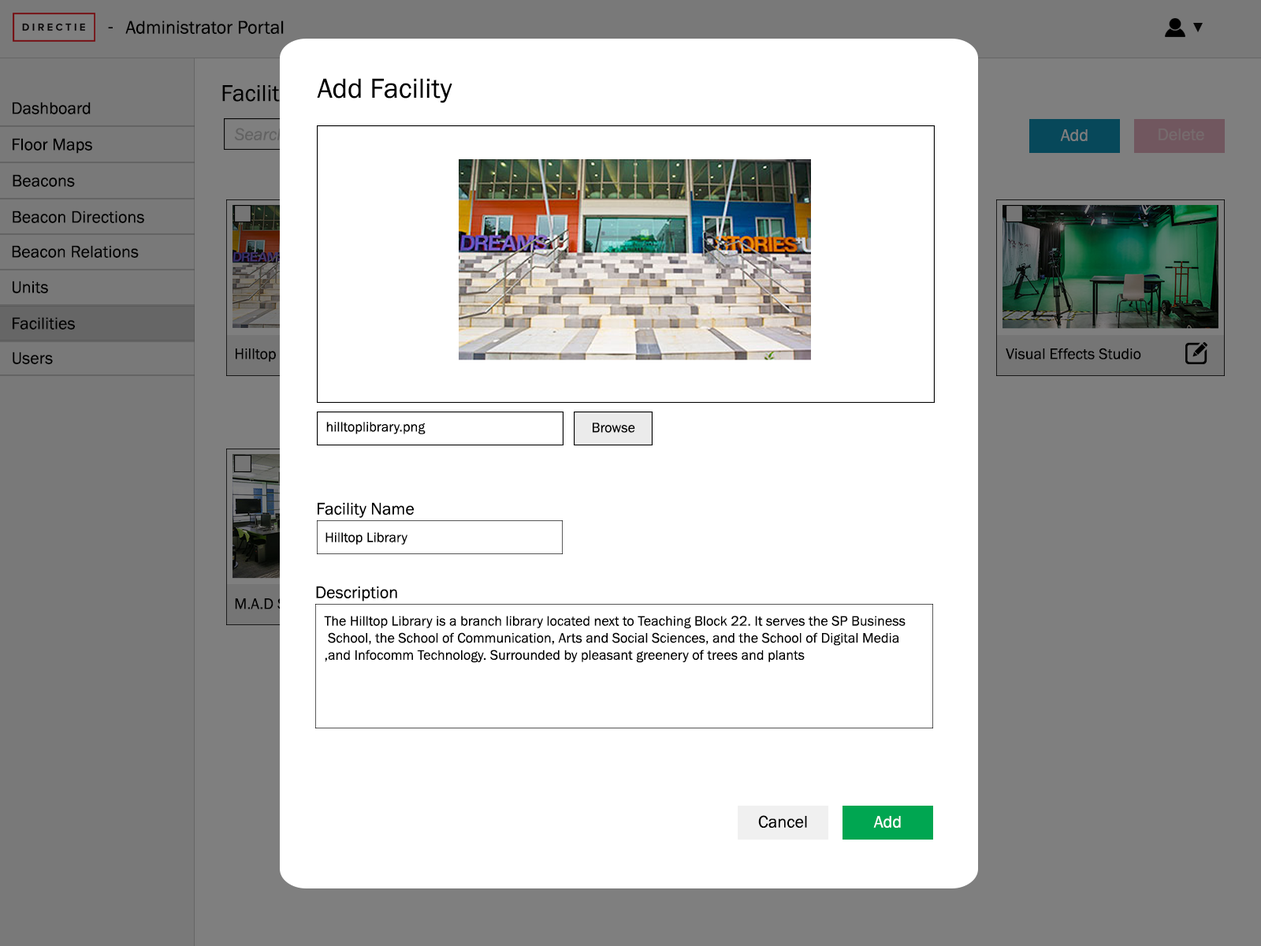
<style>
.page{position:relative;width:1261px;height:946px;background:#ffffff}
.page>*{position:absolute;margin:0}
.t1{font:18.9px "FranklinGothic-Book";color:#000000}
.t2{font:23.6px "FranklinGothic-Book";color:#000000}
.t3{font:28.4px "FranklinGothic-Book";color:#000000}
.t4{font:17.3px "FranklinGothic-Book";color:#000000}
.t5{font:17.3px "FranklinGothic-Book";color:#7f7f7f}
.t6{font:17.3px "FranklinGothic-Book";color:#766b6d}
.t7{font:15.7px "FranklinGothic-Book";color:#000000}
.t8{font:14.2px "FranklinGothic-Book";color:#000000}
.t9{font:17.3px "FranklinGothic-Book";color:#010101}
.t10{font:17.3px "FranklinGothic-Book";color:#fefefe}
</style>
<div class="page">
<p class="t1" style="left:108px;top:27px;width:5px;height:1px">-</p>
<p class="t1" style="left:125px;top:20px;width:159px;height:14px">Administrator Portal</p>
<p class="t2" style="left:222px;top:85px;width:86px;height:17px">Facilities</p>
<p class="t3" style="left:317px;top:78px;width:135px;height:25px">Add Facility</p>
<p class="t4" style="left:13px;top:102px;width:78px;height:12px">Dashboard</p>
<p class="t4" style="left:13px;top:138px;width:79px;height:16px">Floor Maps</p>
<p class="t5" style="left:1060px;top:129px;width:28px;height:12px">Add</p>
<p class="t6" style="left:1158px;top:128px;width:46px;height:12px">Delete</p>
<p class="t4" style="left:13px;top:174px;width:62px;height:13px">Beacons</p>
<p class="t4" style="left:13px;top:210px;width:131px;height:13px">Beacon Directions</p>
<p class="t4" style="left:12px;top:245px;width:127px;height:13px">Beacon Relations</p>
<p class="t4" style="left:13px;top:281px;width:35px;height:12px">Units</p>
<p class="t4" style="left:13px;top:317px;width:62px;height:12px">Facilities</p>
<p class="t4" style="left:13px;top:351px;width:40px;height:13px">Users</p>
<p class="t7" style="left:1006px;top:348px;width:135px;height:11px">Visual Effects Studio</p>
<p class="t8" style="left:326px;top:422px;width:100px;height:12px">hilltoplibrary.png</p>
<p class="t8" style="left:593px;top:422px;width:42px;height:11px">Browse</p>
<p class="t4" style="left:318px;top:502px;width:97px;height:16px">Facility Name</p>
<p class="t8" style="left:325px;top:532px;width:82px;height:13px">Hilltop Library</p>
<p class="t4" style="left:316px;top:586px;width:81px;height:15px">Description</p>
<p class="t8" style="left:324px;top:615px;width:581px;height:48px;text-align:right">The Hilltop Library is a branch library located next to Teaching Block 22. It serves the SP Business<br>School, the School of Communication, Arts and Social Sciences, and the School of Digital Media <br>and Infocomm Technology. Surrounded by pleasant greenery of trees and plants,</p>
<p class="t9" style="left:758px;top:815px;width:49px;height:12px">Cancel</p>
<p class="t10" style="left:873px;top:816px;width:28px;height:11px">Add</p>
</div>
